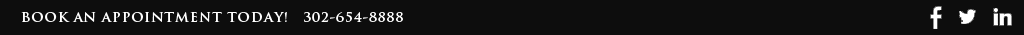
<style>
.page{position:relative;width:1024px;height:35px;background:#0d0d0d}
.page>*{position:absolute;margin:0}
.t1{font:13.3px "TrajanPro-Bold";letter-spacing:0.06em;color:#ffffff}
</style>
<div class="page">
<p class="t1" style="left:21px;top:12px;width:382px;height:10px">BOOK AN APPOINTMENT TODAY!   302-654-8888</p>
</div>
